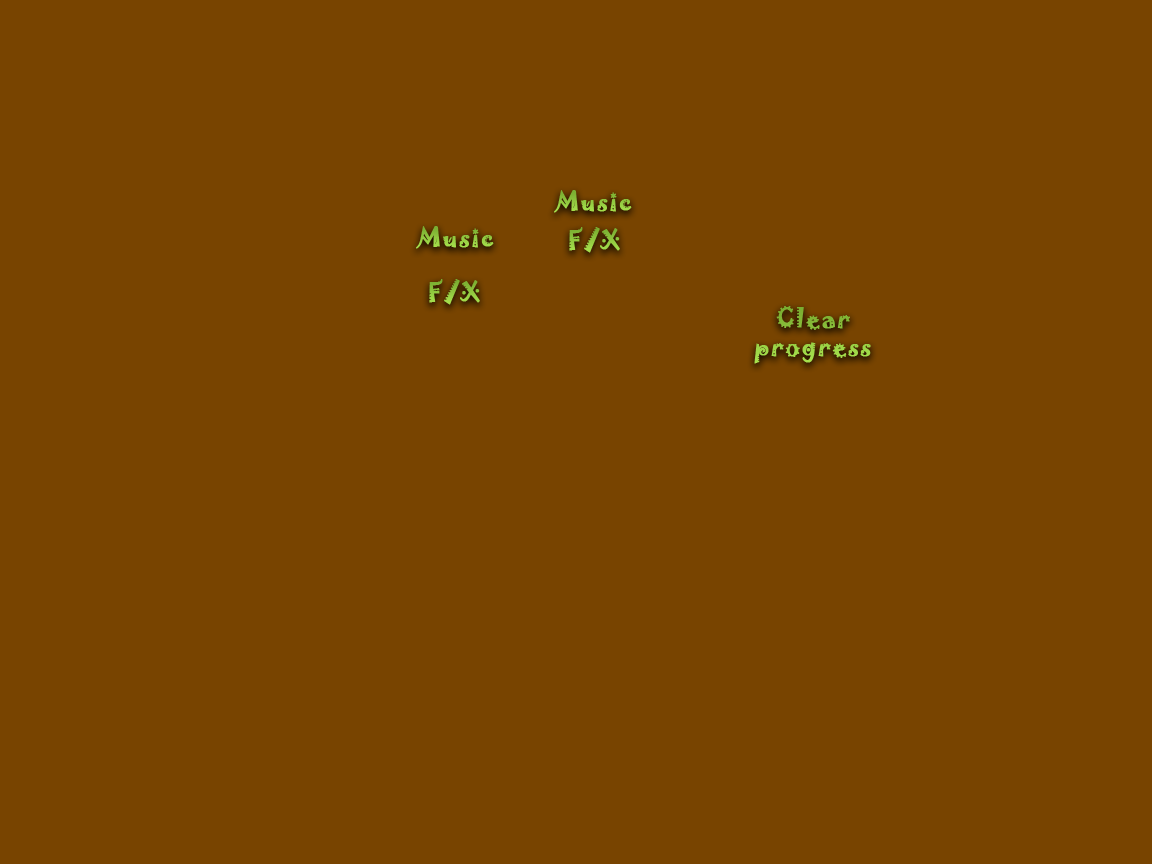
<style>
.page{position:relative;width:1152px;height:864px;background:#784400}
.page>*{position:absolute;margin:0}
.t1{font:24px "Jokerman-Regular";letter-spacing:0.05em;color:#95cd42;font-weight:bold}
.t2{font:24px "Jokerman-Regular";letter-spacing:0.05em;color:#8fc63e;font-weight:bold}
.t3{font:24px "Jokerman-Regular";letter-spacing:0.05em;font-weight:bold}
</style>
<div class="page">
<p class="t1" style="left:554px;top:190px;width:78px;height:23px">Music</p>
<p class="t2" style="left:569px;top:227px;width:51px;height:26px">F/X</p>
<p class="t3" style="left:754px;top:306px;width:117px;height:58px;text-align:center">Clear<br>progress</p>
</div>
